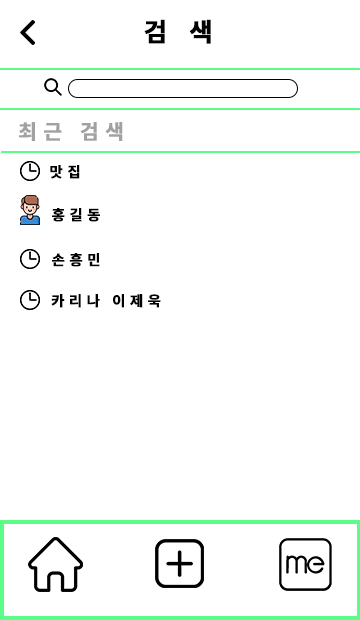
<style>
.page{position:relative;width:360px;height:620px;background:#ffffff}
.page>*{position:absolute;margin:0}
.t1{font:25.2px "NotoSansKR-Bold";letter-spacing:0.3em;color:#000000;font-weight:bold}
.t2{font:20.2px "NotoSansKR-Bold";letter-spacing:0.3em;color:#a1a1a1;font-weight:bold}
.t3{font:14.2px "NotoSansKR-Bold";letter-spacing:0.3em;color:#000000;font-weight:bold}
</style>
<div class="page">
<p class="t1" style="left:144px;top:19px;width:67px;height:25px">검 색</p>
<p class="t2" style="left:19px;top:122px;width:104px;height:19px">최근 검색</p>
<p class="t3" style="left:50px;top:165px;width:30px;height:14px">맛집</p>
<p class="t3" style="left:52px;top:208px;width:48px;height:14px">홍길동</p>
<p class="t3" style="left:52px;top:253px;width:48px;height:14px">손흥민</p>
<p class="t3" style="left:51px;top:294px;width:110px;height:14px">카리나 이제욱</p>
</div>
